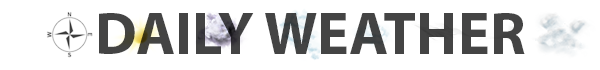
<style>
.page{position:relative;width:600px;height:70px;background:#ffffff}
.page>*{position:absolute;margin:0}
.t1{font:60px "MyriadPro-Bold";color:#444444}
</style>
<div class="page">
<p class="t1" style="left:99px;top:13px;width:426px;height:41px">DAILY WEATHER</p>
</div>
